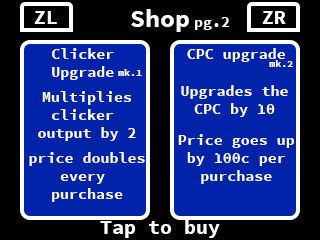
<style>
.page{position:relative;width:320px;height:240px;background:#0023aa}
.page>*{position:absolute;margin:0}
.t1{font:20px "SourceCodePro-Bold";color:#ffffff}
.t2{font:25px "SourceCodePro-Bold";color:#ffffff}
.t3{font:15px "SourceCodePro-Bold";color:#fffefe}
.t4{font:10px "SourceCodePro-Bold";color:#fffefe}
</style>
<div class="page">
<p class="t1" style="left:34px;top:11px;width:23px;height:13px">ZL</p>
<p class="t2" style="left:131px;top:9px;width:58px;height:23px">Shop</p>
<p class="t3" style="left:195px;top:17px;width:34px;height:13px">pg.2</p>
<p class="t1" style="left:262px;top:11px;width:24px;height:13px">ZR</p>
<p class="t3" style="left:52px;top:48px;width:62px;height:32px">Clicker<br>Upgrade</p>
<p class="t3" style="left:187px;top:48px;width:98px;height:14px">CPC upgrade</p>
<p class="t4" style="left:269px;top:60px;width:24px;height:7px">mk.2</p>
<p class="t4" style="left:118px;top:69px;width:24px;height:7px">mk.1</p>
<p class="t3" style="left:181px;top:85px;width:107px;height:32px;text-align:center">Upgrades the<br>CPC by 10</p>
<p class="t3" style="left:38px;top:91px;width:98px;height:50px;text-align:center">Multiplies<br>clicker <br>output by 2</p>
<p class="t3" style="left:178px;top:134px;width:116px;height:50px;text-align:center">Price goes up<br>by 100c per<br>purchase</p>
<p class="t3" style="left:29px;top:152px;width:116px;height:50px;text-align:center">price doubles<br>every <br>purchase</p>
<p class="t1" style="left:100px;top:220px;width:120px;height:18px">Tap to buy</p>
</div>
